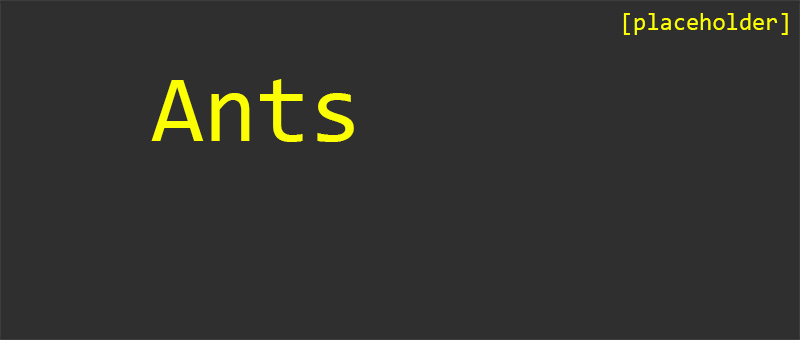
<style>
.page{position:relative;width:800px;height:340px;background:#2f2f2f}
.page>*{position:absolute;margin:0}
.t1{font:24px "Consolas";color:#fcff01}
.t2{font:96px "Consolas";color:#fcff01}
</style>
<div class="page">
<p class="t1" style="left:623px;top:13px;width:165px;height:22px">[placeholder]</p>
<p class="t2" style="left:151px;top:79px;width:203px;height:63px">Ants</p>
</div>
